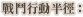
<style>
.page{position:relative;width:83px;height:17px;background:#dfd4cb}
.page>*{position:absolute;margin:0}
.t1{font:12px "RyuminPr6N-ExBold";color:#534738}
</style>
<div class="page">
<p class="t1" style="left:2px;top:2px;width:73px;height:13px">戰鬥行動半徑</p>
</div>
